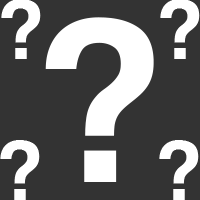
<style>
.page{position:relative;width:200px;height:200px;background:#333333}
.page>*{position:absolute;margin:0}
.t1{font:86px "CoolveticaRg-Regular";letter-spacing:0.01em;color:#ffffff}
.t2{font:240px "CoolveticaRg-Regular";letter-spacing:0.01em;color:#ffffff}
</style>
<div class="page">
<p class="t1" style="left:1px;top:0px;width:40px;height:59px">?</p>
<p class="t1" style="left:160px;top:0px;width:40px;height:59px">?</p>
<p class="t2" style="left:45px;top:17px;width:109px;height:165px">?</p>
<p class="t1" style="left:0px;top:140px;width:40px;height:60px">?</p>
<p class="t1" style="left:159px;top:140px;width:40px;height:60px">?</p>
</div>
